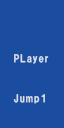
<style>
.page{position:relative;width:64px;height:128px;background:#1a4d9f}
.page>*{position:absolute;margin:0}
.t1{font:10px/40px "HGPSoeiKakugothicUB";letter-spacing:0.1em;color:#d9e1ed}
</style>
<div class="page">
<p class="t1" style="left:13px;top:54px;width:36px;height:50px">PLayer<br>Jump1</p>
</div>
